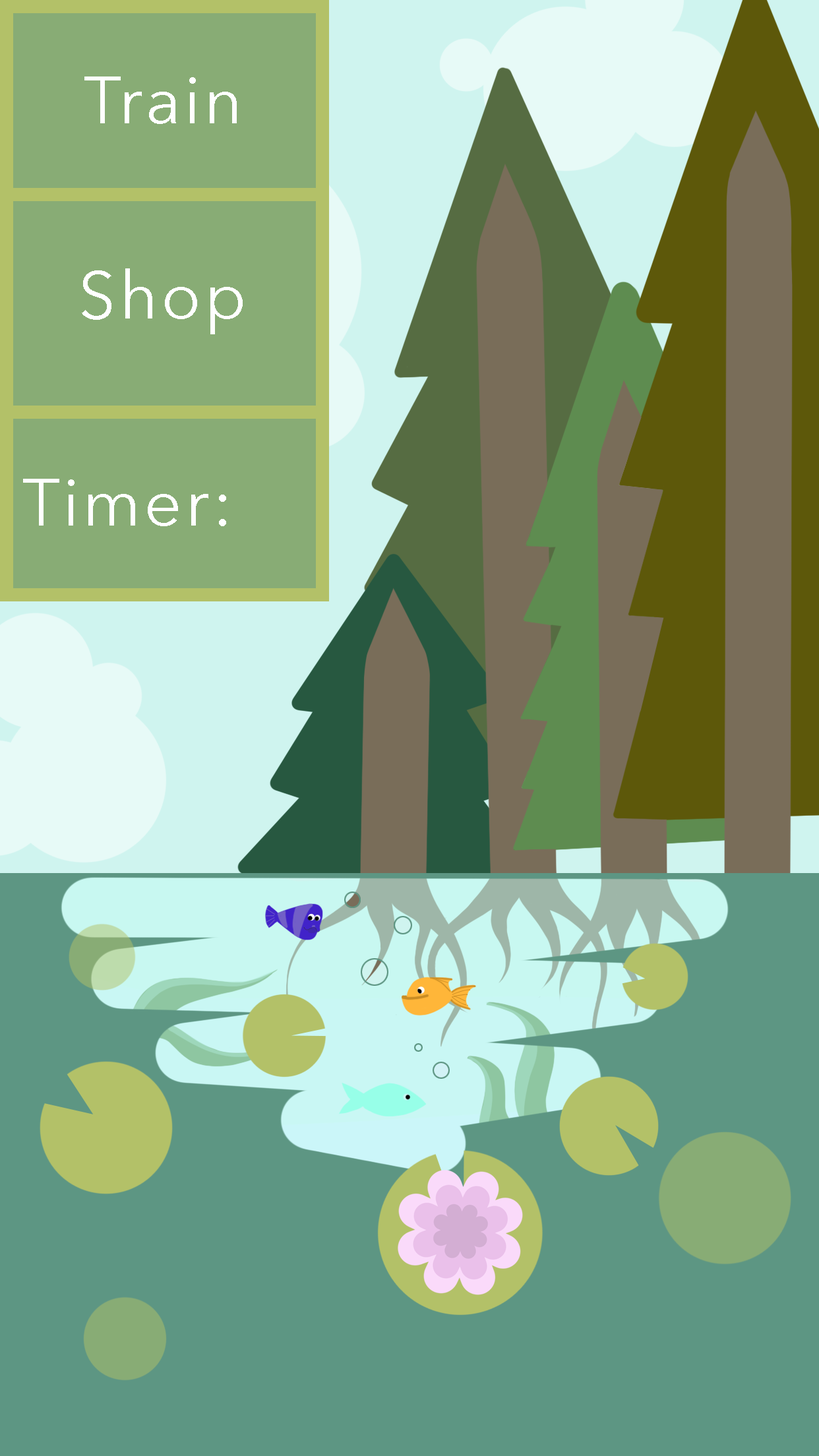
<style>
.page{position:relative;width:819px;height:1456px;background:#5d9683}
.page>*{position:absolute;margin:0}
.t1{font:65.9px "AvenirNext-Regular";letter-spacing:0.05em;color:#ffffff}
</style>
<div class="page">
<p class="t1" style="left:84px;top:76px;width:153px;height:48px">Train</p>
<p class="t1" style="left:82px;top:268px;width:161px;height:66px">Shop</p>
<p class="t1" style="left:23px;top:479px;width:203px;height:47px">Timer:</p>
</div>
